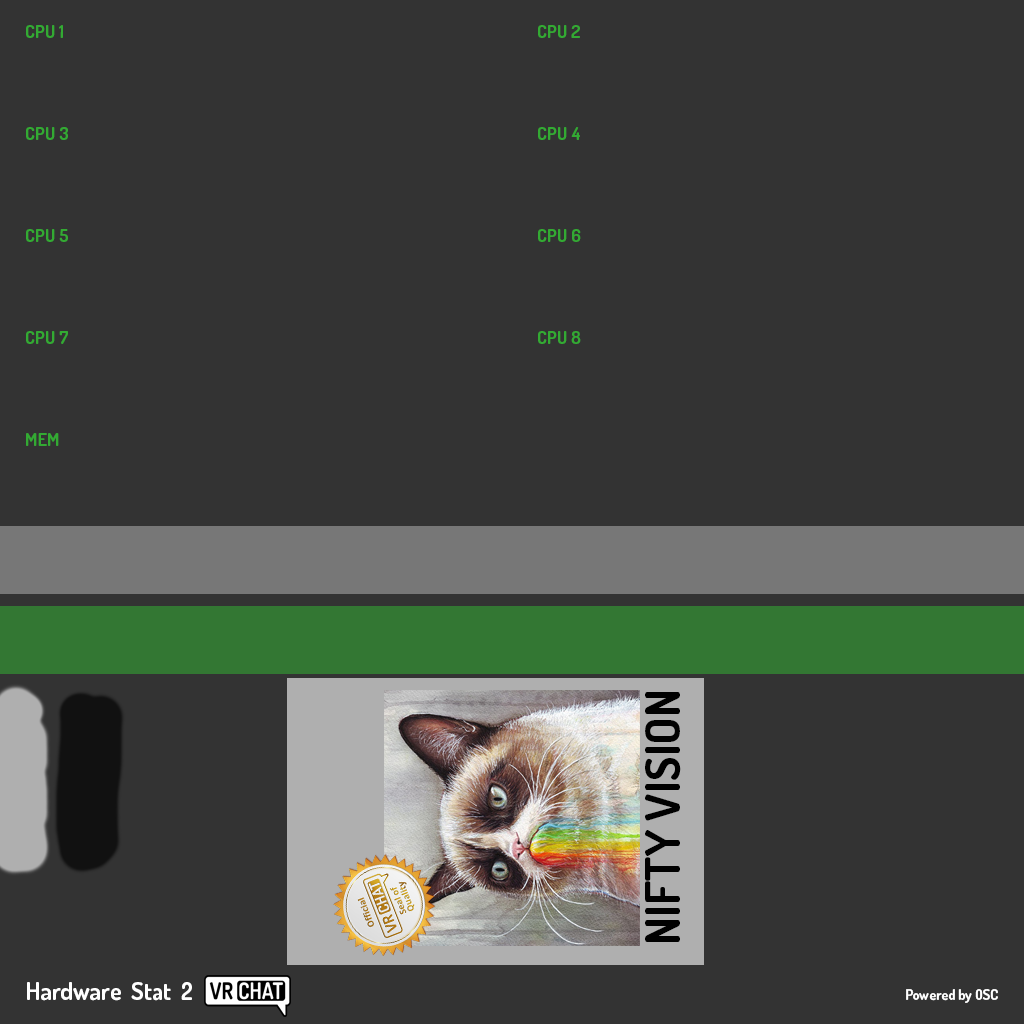
<style>
.page{position:relative;width:1024px;height:1024px;background:#333333}
.page>*{position:absolute;margin:0}
.t1{font:18px "Dosis-Bold";color:#33aa33}
.t2{font:47.1px "Dosis-Bold";color:#010101}
.t3{font:24px "Dosis-Bold";color:#ffffff}
.t4{font:14px "Dosis-Bold";color:#ffffff}
</style>
<div class="page">
<p class="t1" style="left:26px;top:25px;width:37px;height:13px">CPU 1</p>
<p class="t1" style="left:538px;top:25px;width:42px;height:13px">CPU 2</p>
<p class="t1" style="left:26px;top:127px;width:42px;height:13px">CPU 3</p>
<p class="t1" style="left:538px;top:127px;width:42px;height:13px">CPU 4</p>
<p class="t1" style="left:26px;top:229px;width:42px;height:13px">CPU 5</p>
<p class="t1" style="left:538px;top:229px;width:43px;height:13px">CPU 6</p>
<p class="t1" style="left:26px;top:331px;width:42px;height:13px">CPU 7</p>
<p class="t1" style="left:538px;top:331px;width:43px;height:13px">CPU 8</p>
<p class="t1" style="left:26px;top:433px;width:33px;height:13px">MEM</p>
<p class="t2" style="left:645px;top:692px;width:36px;height:250px;rotate:-90deg">NIFTY VISION</p>
<p class="t3" style="left:27px;top:982px;width:165px;height:19px">Hardware  Stat  2</p>
<p class="t4" style="left:906px;top:989px;width:92px;height:14px">Powered by OSC</p>
</div>
